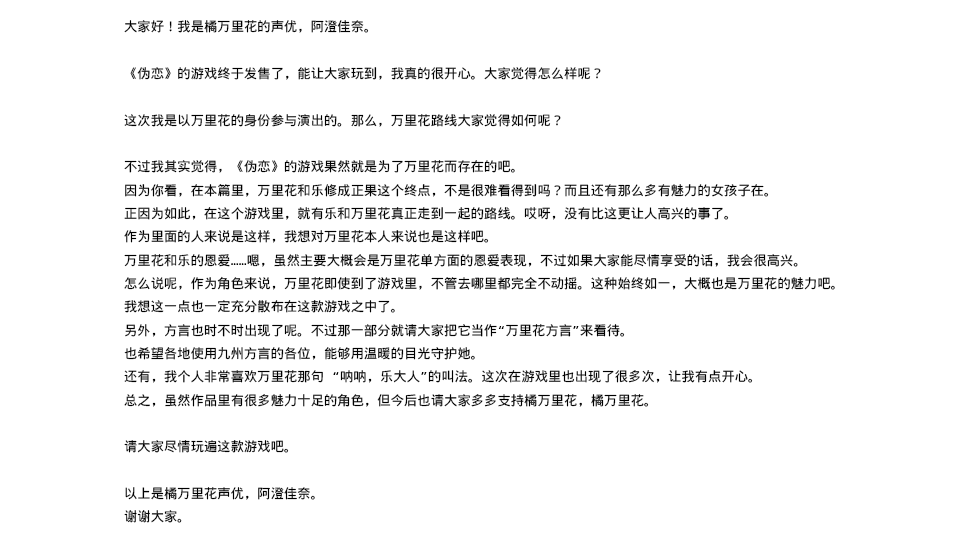
<style>
.page{position:relative;width:960px;height:544px;background:#ffffff}
.page>*{position:absolute;margin:0}
.t1{font:13.3px "WenQuanYiMicroHeiMono";color:#000000}
</style>
<div class="page">
<p class="t1" style="left:124px;top:20px;width:711px;height:503px">大家好！我是橘万里花的声优，阿澄佳奈。<br><br>《伪恋》的游戏终于发售了，能让大家玩到，我真的很开心。大家觉得怎么样呢？<br><br>这次我是以万里花的身份参与演出的。那么，万里花路线大家觉得如何呢？<br><br>不过我其实觉得，《伪恋》的游戏果然就是为了万里花而存在的吧。<br>因为你看，在本篇里，万里花和乐修成正果这个终点，不是很难看得到吗？而且还有那么多有魅力的女孩子在。<br>正因为如此，在这个游戏里，就有乐和万里花真正走到一起的路线。哎呀，没有比这更让人高兴的事了。<br>作为里面的人来说是这样，我想对万里花本人来说也是这样吧。<br>万里花和乐的恩爱……嗯，虽然主要大概会是万里花单方面的恩爱表现，不过如果大家能尽情享受的话，我会很高兴。<br>怎么说呢，作为角色来说，万里花即使到了游戏里，不管去哪里都完全不动摇。这种始终如一，大概也是万里花的魅力吧。<br>我想这一点也一定充分散布在这款游戏之中了。<br>另外，方言也时不时出现了呢。不过那一部分就请大家把它当作“万里花方言”来看待。<br>也希望各地使用九州方言的各位，能够用温暖的目光守护她。<br>还有，我个人非常喜欢万里花那句 “呐呐，乐大人”的叫法。这次在游戏里也出现了很多次，让我有点开心。<br>总之，虽然作品里有很多魅力十足的角色，但今后也请大家多多支持橘万里花，橘万里花。<br><br>请大家尽情玩遍这款游戏吧。<br><br>以上是橘万里花声优，阿澄佳奈。<br>谢谢大家。</p>
</div>
